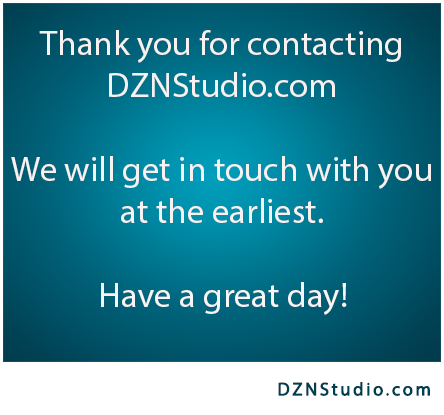
<style>
.page{position:relative;width:444px;height:415px}
.page>*{position:absolute;margin:0}
.t1{font:35px "MyriadPro-Regular";color:#f6f2f2}
.t2{font:35px "MyriadPro-Regular";color:#f7f5f5}
.t3{font:18.3px "MyriadPro-Regular";letter-spacing:0.12em;color:#003f52;font-weight:bold}
</style>
<div class="page">
<p class="t1" style="left:11px;top:30px;width:420px;height:193px;text-align:center">Thank you for contacting<br>DZNStudio.com<br><br>We will get in touch with you<br>at the earliest.</p>
<p class="t2" style="left:101px;top:282px;width:246px;height:33px">Have a great day!</p>
<p class="t3" style="left:278px;top:382px;width:152px;height:14px">DZNStudio.com</p>
</div>
